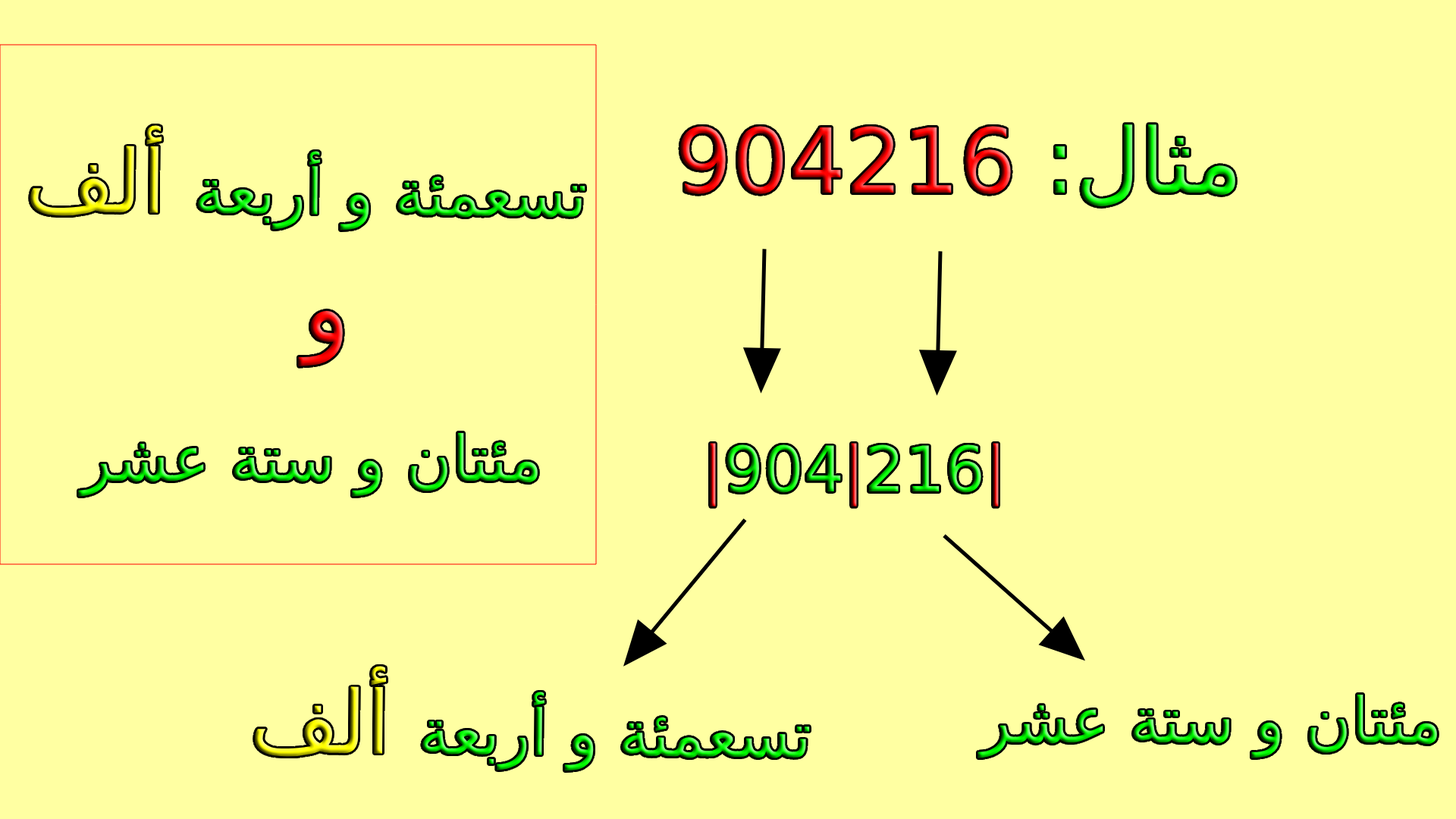
<style>
.page{position:relative;width:1456px;height:819px;background:#ffffa2}
.page>*{position:absolute;margin:0}
.t1{font:62.9px "DejaVuSans"}
.t2{font:87.2px "DejaVuSans"}
.t3{font:89.5px "DejaVuSans"}
.t4{font:98.6px "DejaVuSans"}
</style>
<div class="page">
<p class="t1" style="left:30px;top:125px;width:555px;height:106px;rotate:1deg">تسعمئة و أربعة <span class="t2">ألف</span></p>
<p class="t3" style="left:680px;top:124px;width:555px;height:82px">مثال: 904216</p>
<p class="t4" style="left:298px;top:310px;width:45px;height:56px">و</p>
<p class="t1" style="left:78px;top:432px;width:460px;height:65px">مئتان و ستة عشر</p>
<p class="t1" style="left:710px;top:443px;width:289px;height:64px">|904|216|</p>
<p class="t1" style="left:255px;top:666px;width:555px;height:105px;rotate:1deg">تسعمئة و أربعة <span class="t2">ألف</span></p>
<p class="t1" style="left:977px;top:694px;width:460px;height:64px">مئتان و ستة عشر</p>
</div>
